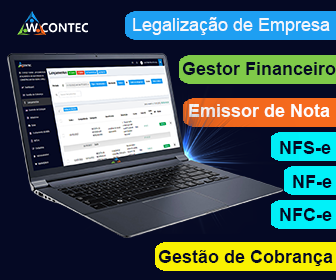
<style>
.page{position:relative;width:336px;height:280px;background:#050924}
.page>*{position:absolute;margin:0}
.t1{font:18px "ArialMT";color:#f5f6fa}
.t2{font:18px "Arial-BoldMT";color:#050924}
.t3{font:18px "Arial-BoldMT";color:#fefdfc}
</style>
<div class="page">
<p class="t1" style="left:133px;top:17px;width:197px;height:18px">Legalização de Empresa</p>
<p class="t2" style="left:182px;top:62px;width:154px;height:13px">Gestor Financeiro</p>
<p class="t3" style="left:189px;top:104px;width:141px;height:13px">Emissor de Nota</p>
<p class="t2" style="left:280px;top:141px;width:51px;height:13px">NFS-e</p>
<p class="t2" style="left:293px;top:175px;width:39px;height:13px">NF-e</p>
<p class="t2" style="left:280px;top:208px;width:52px;height:13px">NFC-e</p>
<p class="t2" style="left:158px;top:250px;width:175px;height:16px">Gestão de Cobrança</p>
</div>
